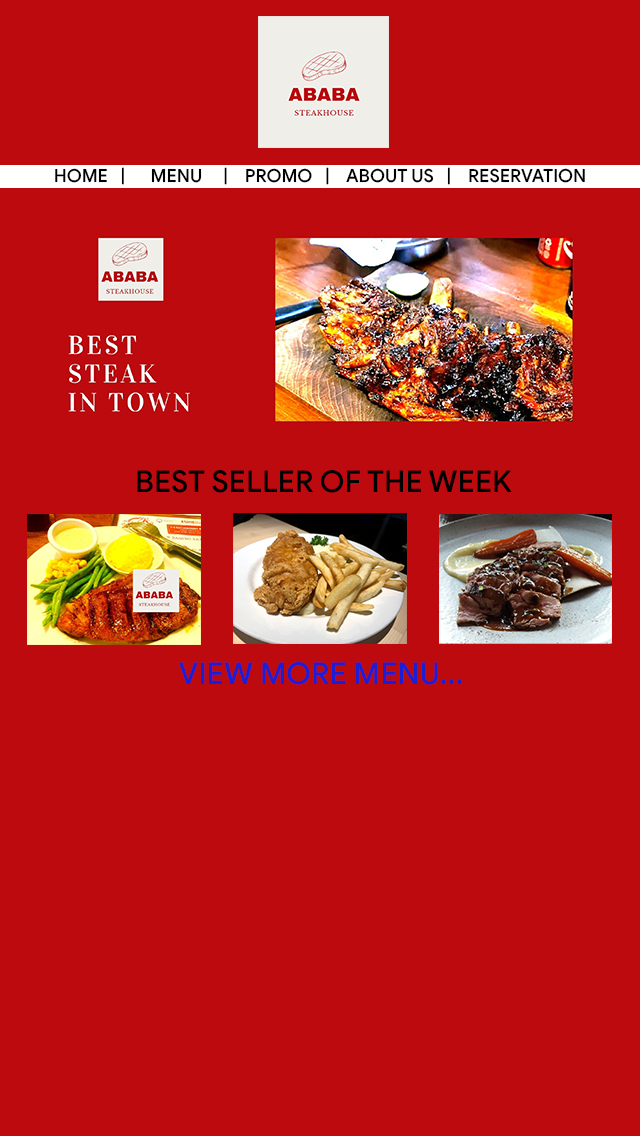
<style>
.page{position:relative;width:640px;height:1136px;background:#bc0a0f}
.page>*{position:absolute;margin:0}
.t1{font:18px "GoogleSans-Medium";color:#000000}
.t2{font:30px "GoogleSans-Medium";color:#000000}
.t3{font:30px "GoogleSans-Medium";color:#1a1ed5}
</style>
<div class="page">
<p class="t1" style="left:55px;top:167px;width:530px;height:18px">HOME   |      MENU     |    PROMO   |    ABOUT US   |    RESERVATION</p>
<p class="t2" style="left:137px;top:470px;width:375px;height:23px">BEST SELLER OF THE WEEK</p>
<p class="t3" style="left:179px;top:662px;width:283px;height:23px">VIEW MORE MENU...</p>
</div>
